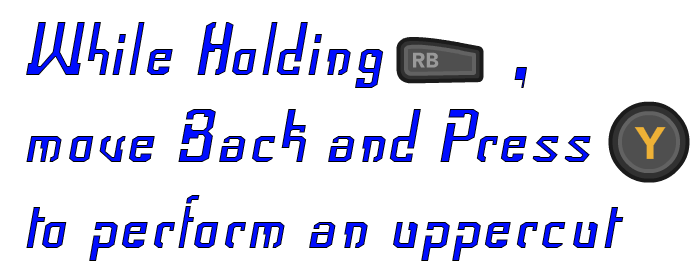
<style>
.page{position:relative;width:700px;height:270px;background:#ffffff}
.page>*{position:absolute;margin:0}
.t1{font:72px "Frak-Regular";color:#000dff}
</style>
<div class="page">
<p class="t1" style="left:26px;top:22px;width:598px;height:239px">While Holding       ,<br>move Back and Press<br>to perform an uppercut</p>
</div>
